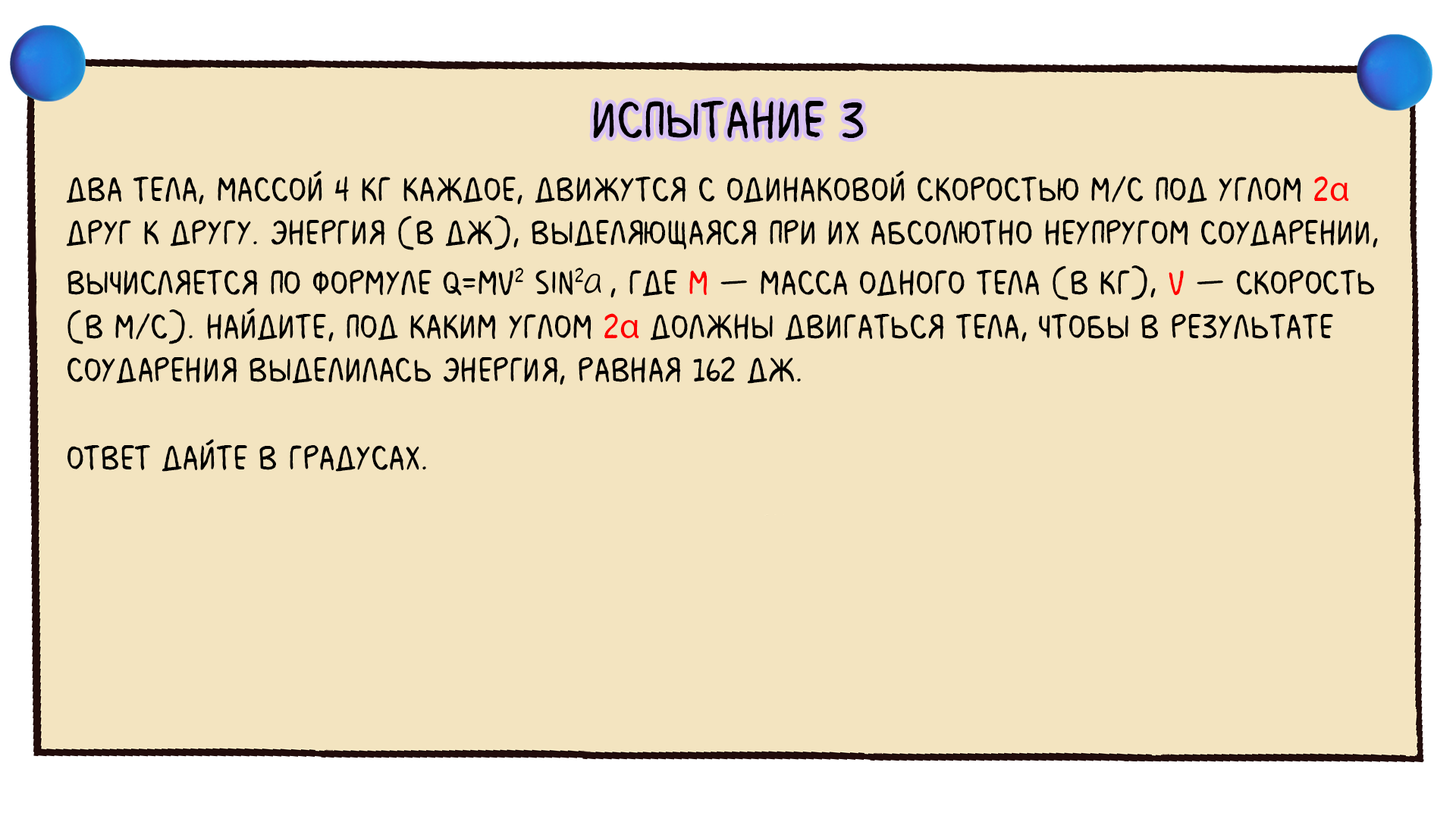
<style>
.page{position:relative;width:1456px;height:819px;background:#f3e4c0}
.page>*{position:absolute;margin:0}
.t1{font:54.6px "MilkMustacheBB";color:#000000}
.t2{font:36.4px "MilkMustacheBB";color:#000000}
.t3{font:36.4px "MilkMustacheBB";color:#ff0000}
.t4{font:36.4px "MyriadPro-Regular";color:#ff0000}
.t5{font:41.7px "Yahfie";color:#000000}
.t6{font:36.4px "MilkMustacheBB";color:#fe0000}
.t7{font:36.4px "MyriadPro-Regular";color:#fe0000}
</style>
<div class="page">
<p class="t1" style="left:593px;top:100px;width:271px;height:40px">испытание 3</p>
<p class="t2" style="left:66px;top:171px;width:1312px;height:301px">Два тела, массой 4 кг каждое, движутся с одинаковой скоростью м/с под углом <span class="t3">2</span><span class="t4">α <br></span>друг к другу. Энергия (в Дж), выделяющаяся при их абсолютно неупругом соударении, <br>вычисляется по формуле Q=mV2 sin2<span class="t5">a </span>, где <span class="t3">m </span>— масса одного тела (в кг), <span class="t3">V</span> — скорость <br>(в м/с). Найдите, под каким углом <span class="t6">2</span><span class="t7">α</span> должны двигаться тела, чтобы в результате <br>соударения выделилась энергия, равная 162 Дж.<br><br>Ответ дайте в градусах.</p>
</div>
